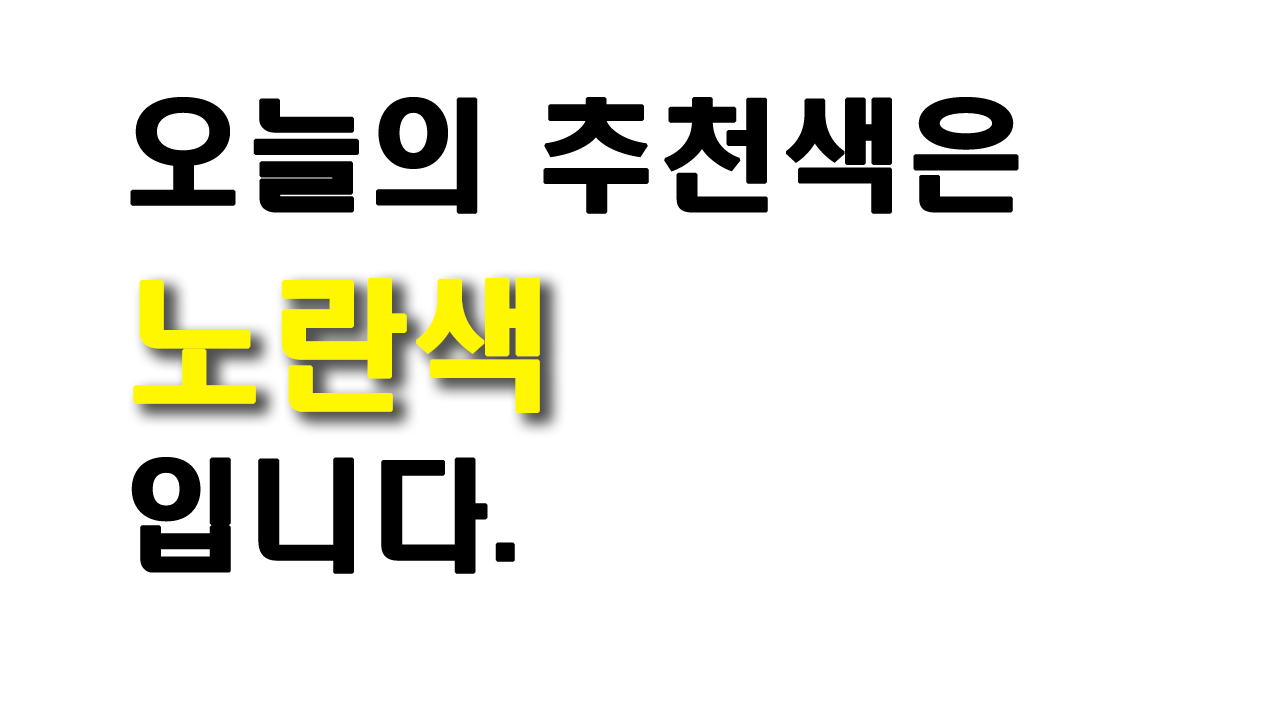
<style>
.page{position:relative;width:1280px;height:720px;background:#ffffff}
.page>*{position:absolute;margin:0}
.t1{font:120px/180px "H2hdrM";color:#000000;font-weight:bold}
.t2{font:120px/72px "H2hdrM";color:#000000;font-weight:bold}
.t3{font:140px "H2hdrM";color:#fff700;font-weight:bold}
</style>
<div class="page">
<p class="t1" style="left:130px;top:97px;width:889px;height:477px"><span class="t2">오</span>늘의 추천색은 <br><br>입니다.</p>
<p class="t3" style="left:133px;top:277px;width:407px;height:136px">노란색</p>
</div>
